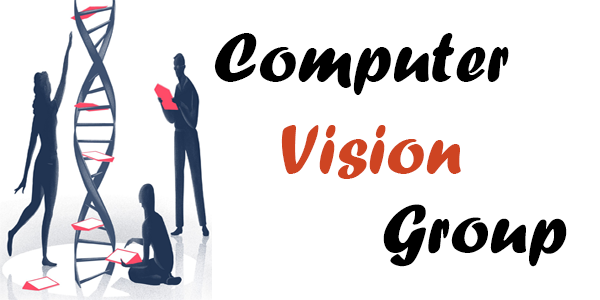
<style>
.page{position:relative;width:600px;height:300px;background:#ffffff}
.page>*{position:absolute;margin:0}
.t1{font:72px "ForteMT";color:#000000}
.t2{font:72px "ForteMT";color:#ce4422}
</style>
<div class="page">
<p class="t1" style="left:214px;top:33px;width:295px;height:62px">Computer</p>
<p class="t2" style="left:281px;top:125px;width:180px;height:54px">Vision</p>
<p class="t1" style="left:383px;top:204px;width:184px;height:63px">Group</p>
</div>
